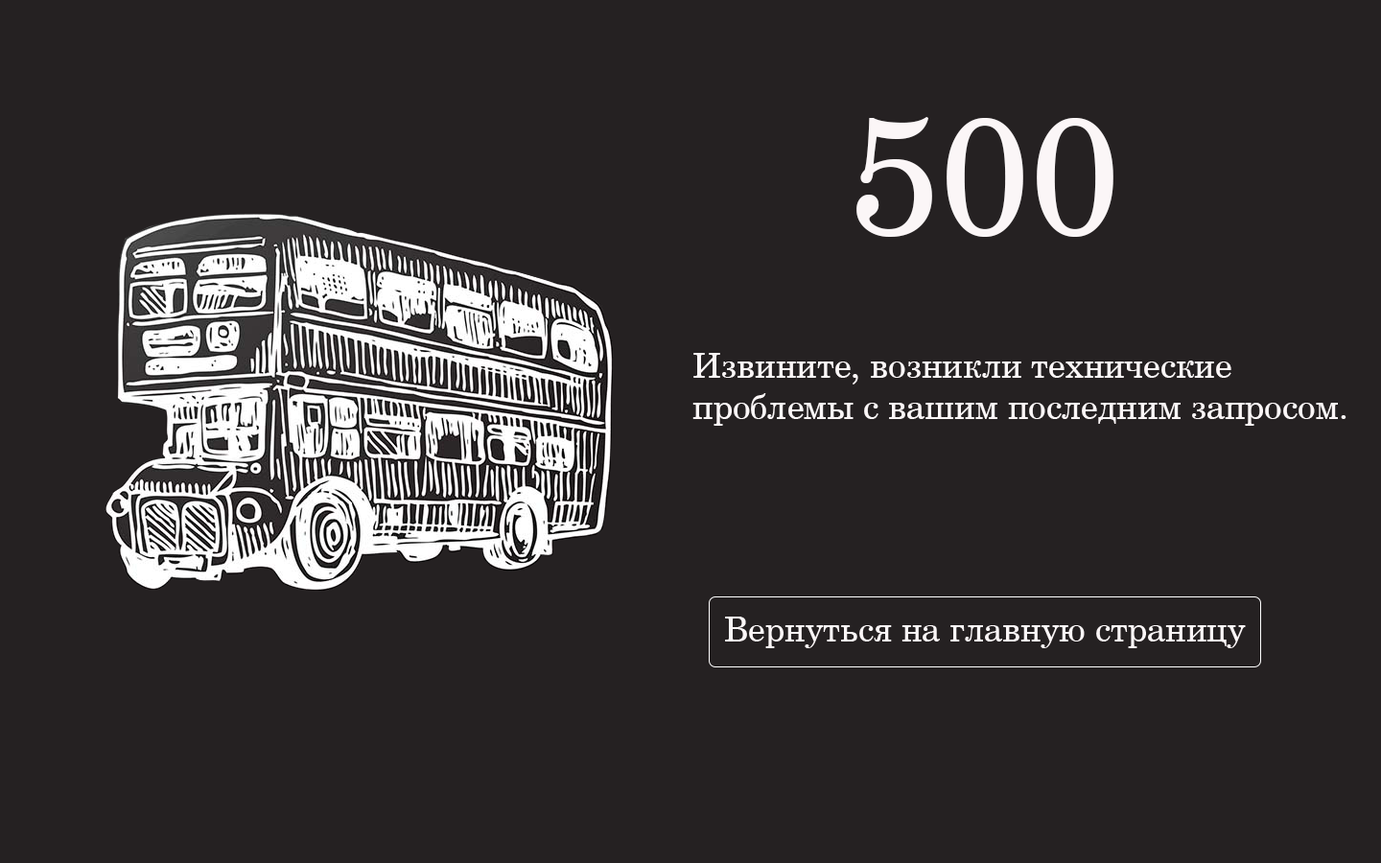
<style>
.page{position:relative;width:1381px;height:863px;background:#252122}
.page>*{position:absolute;margin:0}
.t1{font:165px "CenturySchlbkCyrillicBT-Roman";color:#fbf6f7}
.t2{font:34.5px "CenturySchlbkCyrillicBT-Roman";color:#fbf6f7}
</style>
<div class="page">
<p class="t1" style="left:857px;top:116px;width:257px;height:121px">500</p>
<p class="t2" style="left:693px;top:353px;width:654px;height:73px">Извините, возникли технические <br>проблемы с вашим последним запросом.</p>
</div>
